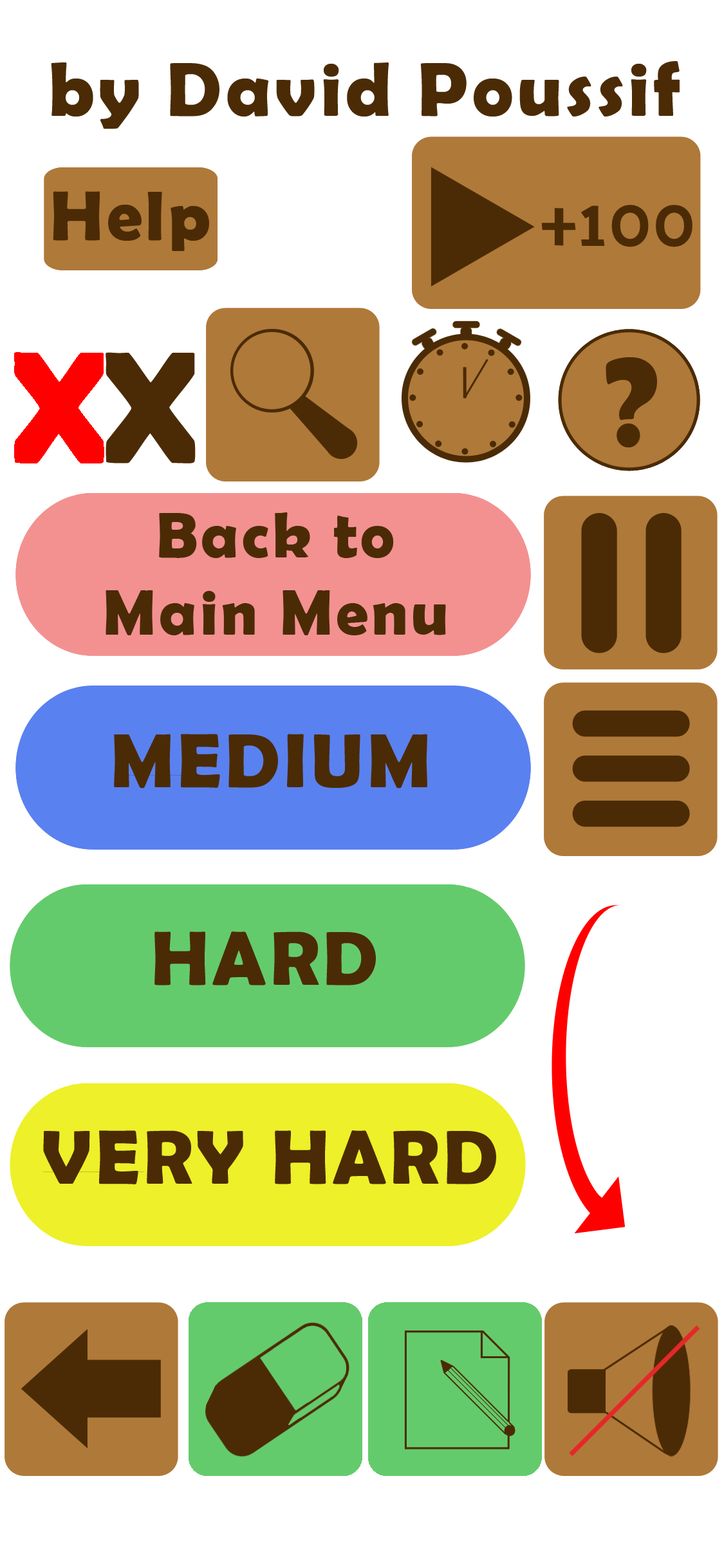
<style>
.page{position:relative;width:724px;height:1568px;background:#ffffff}
.page>*{position:absolute;margin:0}
.t1{font:77.2px "BerlinSansFBDemi-Bold";letter-spacing:0.05em;color:#4b2b05}
.t2{font:70.8px "BerlinSansFBDemi-Bold";letter-spacing:0.05em;color:#4b2b05}
.t3{font:70.8px "Palanquin-Bold";color:#4b2b05}
.t4{font:64.4px "BerlinSansFBDemi-Bold";letter-spacing:0.05em;color:#4b2b05}
</style>
<div class="page">
<p class="t1" style="left:51px;top:61px;width:629px;height:68px">by David Poussif</p>
<p class="t2" style="left:53px;top:191px;width:156px;height:60px">Help</p>
<p class="t3" style="left:541px;top:205px;width:152px;height:42px">+100</p>
<p class="t4" style="left:106px;top:512px;width:340px;height:123px;text-align:center">Back to<br>Main Menu</p>
<p class="t1" style="left:114px;top:734px;width:313px;height:55px">MEDIUM</p>
<p class="t1" style="left:154px;top:931px;width:222px;height:54px">HARD</p>
<p class="t1" style="left:43px;top:1130px;width:453px;height:54px">VERY HARD</p>
</div>
